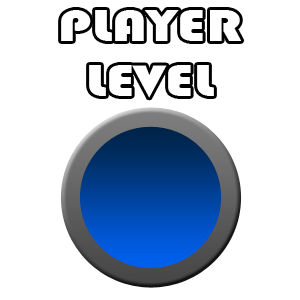
<style>
.page{position:relative;width:300px;height:300px;background:#ffffff}
.page>*{position:absolute;margin:0}
.t1{font:45.8px "Bauhaus93";color:#ffffff;scale:1.3 1}
</style>
<div class="page">
<p class="t1" style="left:61px;top:10px;width:181px;height:88px;text-align:center">PLAYER<br>LEVEL</p>
</div>
